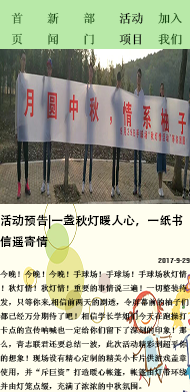
<style>
.page{position:relative;width:190px;height:392px;background:#fffeef}
.page>*{position:absolute;margin:0}
.t1{font:12px "System"}
.t2{font:12px "System";color:#10410b}
.t3{font:12px "System";color:#000000}
.t4{font:8px "System";color:#000000}
.t5{font:12px "AdobeHeitiStd-Regular";color:#000000}
</style>
<div class="page">
<p class="t1" style="left:11px;top:12px;width:12px;height:33px">首<br>页</p>
<p class="t2" style="left:47px;top:12px;width:12px;height:33px">新闻</p>
<p class="t1" style="left:83px;top:12px;width:12px;height:33px">部门</p>
<p class="t3" style="left:119px;top:12px;width:24px;height:33px">活动<br>项目</p>
<p class="t2" style="left:158px;top:12px;width:24px;height:33px">加入<br>我们</p>
<p class="t4" style="left:0px;top:214px;width:190px;height:176px"><span class="t5">活动预告|一盏秋灯暖人心，一纸书信遥寄情<br></span>2017-9-29<br>今晚！今晚！今晚！手球场！手球场！手球场秋灯情！秋灯情！秋灯情！重要的事情说三遍！一切整装待发，只等你来,相信前两天的剧透，令屏幕前的柚子们都已经万分期待了吧！相信学长学姐们今天在跑操打卡点的宣传呐喊也一定给你们留下了深刻的印象！那么，青志联君还要总结一波，此次活动精彩到超乎你的想象！现场设有精心定制的精美小卡片供游戏盖章使用，并“斥巨资”打造暖心帐篷，帐篷由灯带环绕并由灯笼点缀，充满了浓浓的中秋氛围。</p>
</div>
